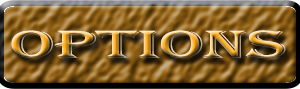
<style>
.page{position:relative;width:300px;height:89px}
.page>*{position:absolute;margin:0}
.t1{font:40.4px "Algerian";color:#ffa200;scale:1.76 1}
</style>
<div class="page">
<p class="t1" style="left:11px;top:30px;width:275px;height:29px">Options</p>
</div>
